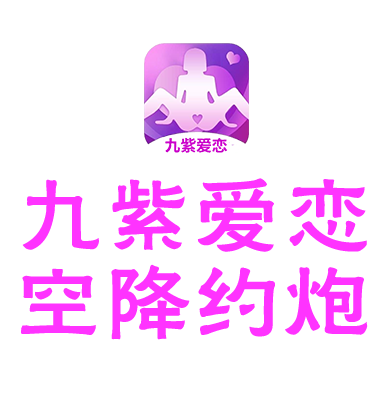
<style>
.page{position:relative;width:392px;height:393px;background:#ffffff}
.page>*{position:absolute;margin:0}
.t1{font:90px/86.8px "FZHLJW--GB1-0";color:#ff33ff}
</style>
<div class="page">
<p class="t1" style="left:21px;top:178px;width:347px;height:162px;text-align:center">九紫爱恋<br>空降约炮</p>
</div>
